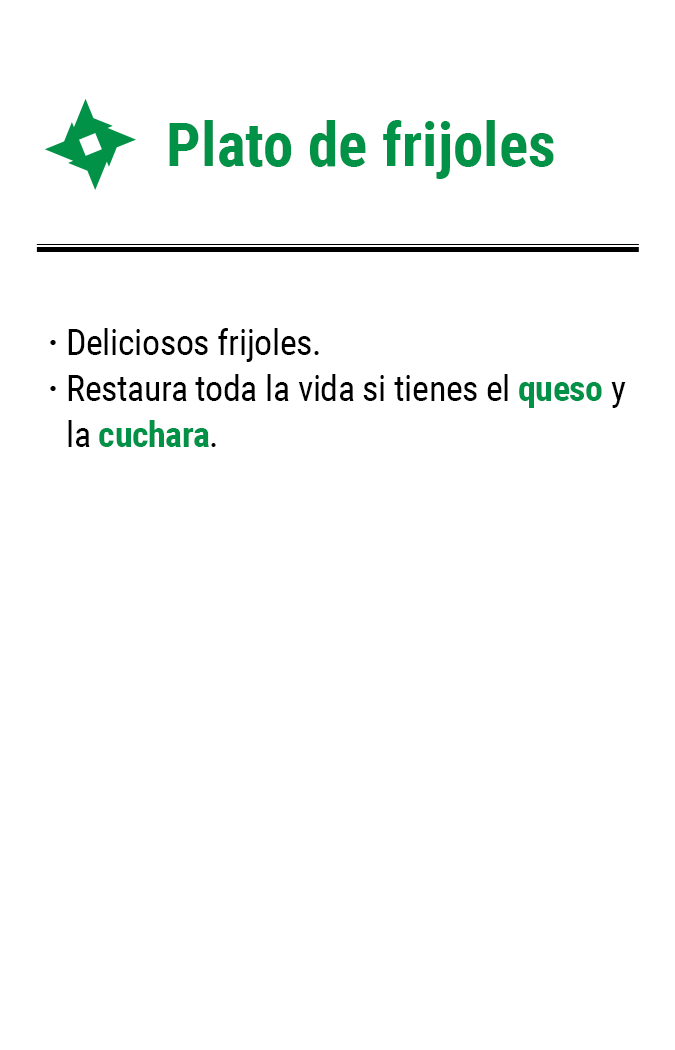
<style>
.page{position:relative;width:675px;height:1050px;background:#ffffff}
.page>*{position:absolute;margin:0}
.t1{font:61.2px "RobotoCondensed-Bold";color:#019147}
.t2{font:35.8px/45.8px "RobotoCondensed-Regular";letter-spacing:-0.01em;color:#000000}
.t3{font:35.8px/45.8px "RobotoCondensed-Bold";letter-spacing:-0.01em;color:#019147}
.t4{font:35.8px/45.8px "RobotoCondensed-Bold";letter-spacing:-0.01em;color:#000000}
</style>
<div class="page">
<p class="t1" style="left:169px;top:120px;width:385px;height:59px">Plato de frijoles</p>
<p class="t2" style="left:68px;top:328px;width:558px;height:119px">Deliciosos frijoles.<br>Restaura toda la vida si tienes el <span class="t3">queso</span> y la <span class="t3">cuchara</span>.</p>
<p class="t4" style="left:50px;top:340px;width:6px;height:51px">·<br>·</p>
</div>
